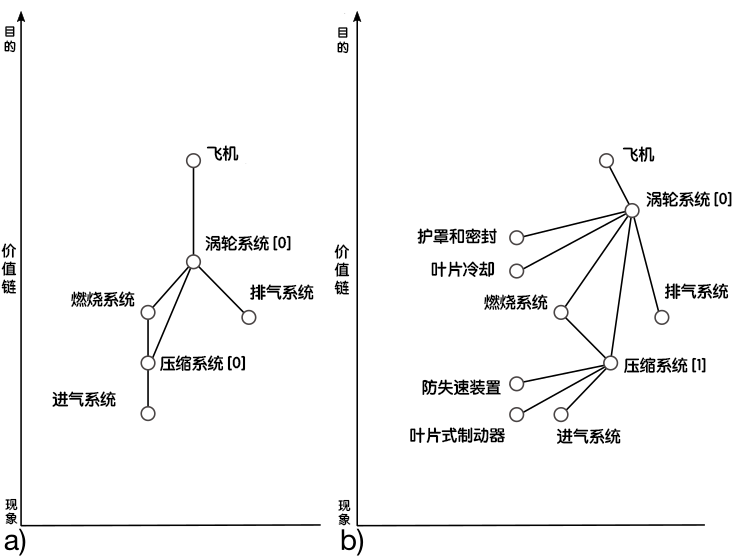
<style>
.page{position:relative;width:750px;height:558px;background:#ffffff}
.page>*{position:absolute;margin:0}
.t1{font:12.2px "STYuanti-SC-Bold";color:#000000}
.t2{font:16px "STYuanti-SC-Bold";color:#000000}
.t3{font:14.7px "STYuanti-SC-Bold";color:#000000}
</style>
<div class="page">
<p class="t1" style="left:4px;top:26px;width:12px;height:27px">目<br>的</p>
<p class="t1" style="left:337px;top:27px;width:12px;height:27px">目<br>的</p>
<p class="t2" style="left:206px;top:145px;width:33px;height:16px">飞机</p>
<p class="t2" style="left:622px;top:146px;width:33px;height:16px">飞机</p>
<p class="t2" style="left:646px;top:191px;width:86px;height:16px">涡轮系统 [0]</p>
<p class="t2" style="left:417px;top:228px;width:80px;height:16px">护罩和密封</p>
<p class="t3" style="left:1px;top:243px;width:16px;height:51px">价<br>值<br>链</p>
<p class="t2" style="left:205px;top:235px;width:86px;height:16px">涡轮系统 [0]</p>
<p class="t3" style="left:334px;top:244px;width:16px;height:51px">价<br>值<br>链</p>
<p class="t2" style="left:431px;top:261px;width:64px;height:16px">叶片冷却</p>
<p class="t2" style="left:71px;top:291px;width:64px;height:16px">燃烧系统</p>
<p class="t2" style="left:250px;top:284px;width:64px;height:16px">排气系统</p>
<p class="t2" style="left:484px;top:294px;width:64px;height:16px">燃烧系统</p>
<p class="t2" style="left:664px;top:283px;width:65px;height:17px">排气系统</p>
<p class="t2" style="left:160px;top:355px;width:86px;height:16px">压缩系统 [0]</p>
<p class="t2" style="left:624px;top:357px;width:82px;height:16px">压缩系统 [1]</p>
<p class="t2" style="left:422px;top:379px;width:79px;height:16px">防失速装置</p>
<p class="t2" style="left:52px;top:391px;width:64px;height:16px">进气系统</p>
<p class="t2" style="left:410px;top:427px;width:95px;height:16px">叶片式制动器</p>
<p class="t2" style="left:556px;top:428px;width:65px;height:16px">进气系统</p>
<p class="t1" style="left:5px;top:498px;width:13px;height:27px">现<br>象</p>
<p class="t1" style="left:338px;top:499px;width:13px;height:27px">现<br>象</p>
</div>
